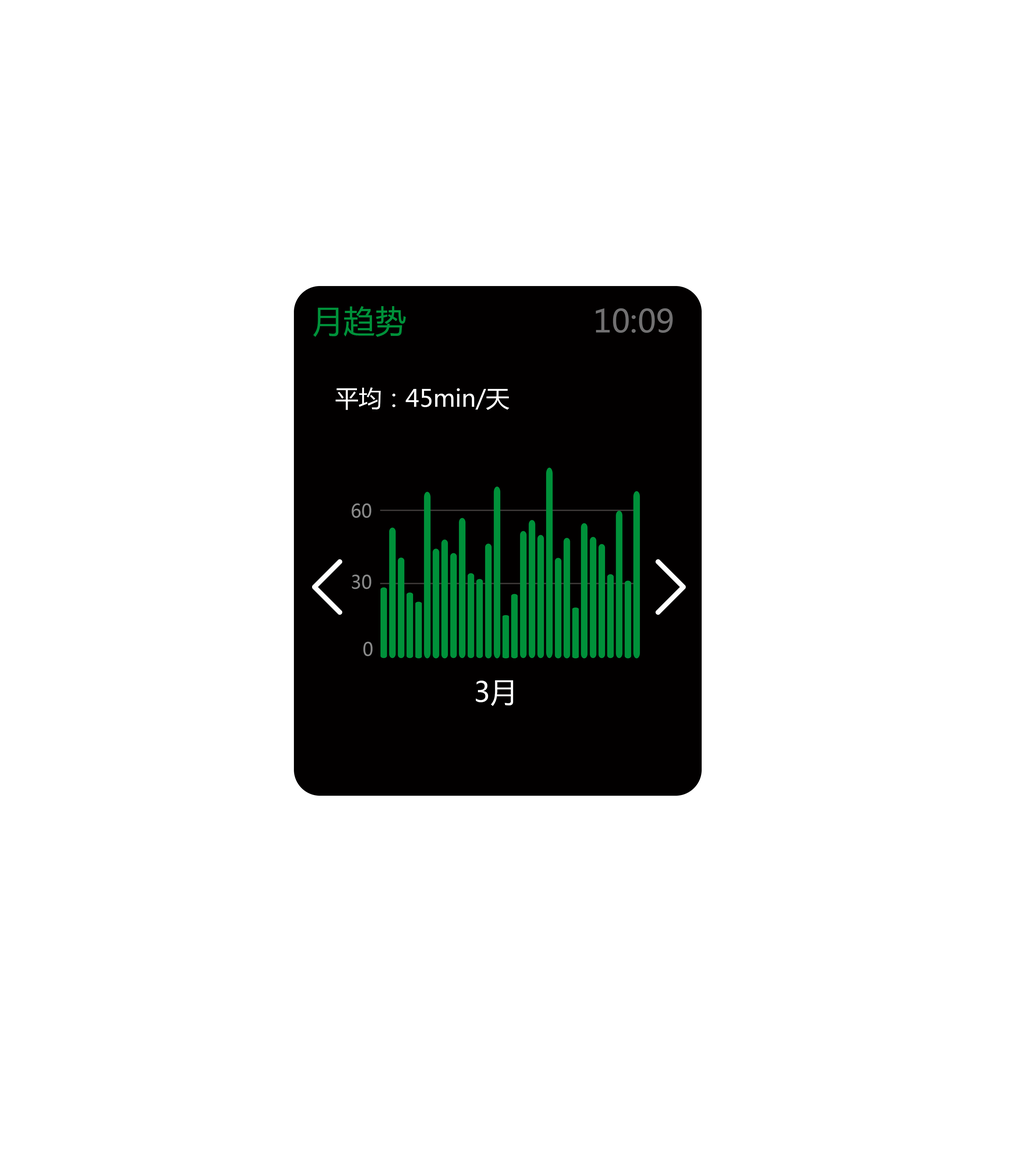
<style>
.page{position:relative;width:1026px;height:1163px;background:#ffffff}
.page>*{position:absolute;margin:0}
.t1{font:31.4px "MicrosoftYaHei";color:#00913a}
.t2{font:31.4px "MicrosoftYaHei";color:#717071}
.t3{font:23.5px "MicrosoftYaHei";color:#ffffff}
.t4{font:18.3px "MicrosoftYaHei";color:#888888}
.t5{font:27.4px "MicrosoftYaHei";color:#ffffff}
</style>
<div class="page">
<p class="t1" style="left:313px;top:306px;width:93px;height:31px">月趋势</p>
<p class="t2" style="left:595px;top:308px;width:78px;height:25px">10:09</p>
<p class="t3" style="left:335px;top:387px;width:174px;height:23px">平均：45min/天</p>
<p class="t4" style="left:351px;top:503px;width:20px;height:15px">60</p>
<p class="t4" style="left:352px;top:574px;width:19px;height:15px">30</p>
<p class="t4" style="left:363px;top:642px;width:9px;height:14px">0</p>
<p class="t5" style="left:476px;top:680px;width:37px;height:26px">3月</p>
</div>
